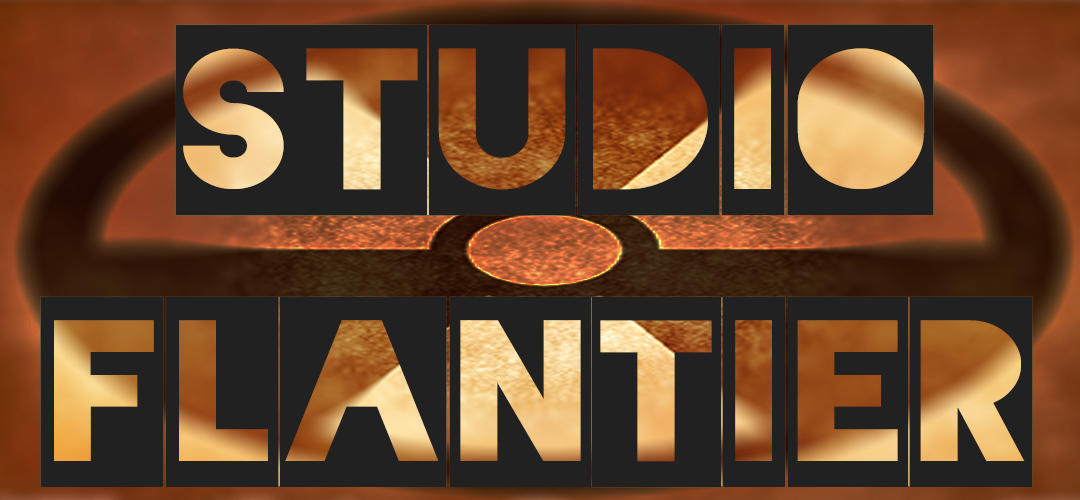
<style>
.page{position:relative;width:1080px;height:500px;background:#212121}
.page>*{position:absolute;margin:0}
.t1{font:227.1px "Blackout-2AM";letter-spacing:0.025em;color:#212121;scale:1.16 1}
</style>
<div class="page">
<p class="t1" style="left:40px;top:24px;width:993px;height:464px">Studio<br>FLANTIER</p>
</div>
